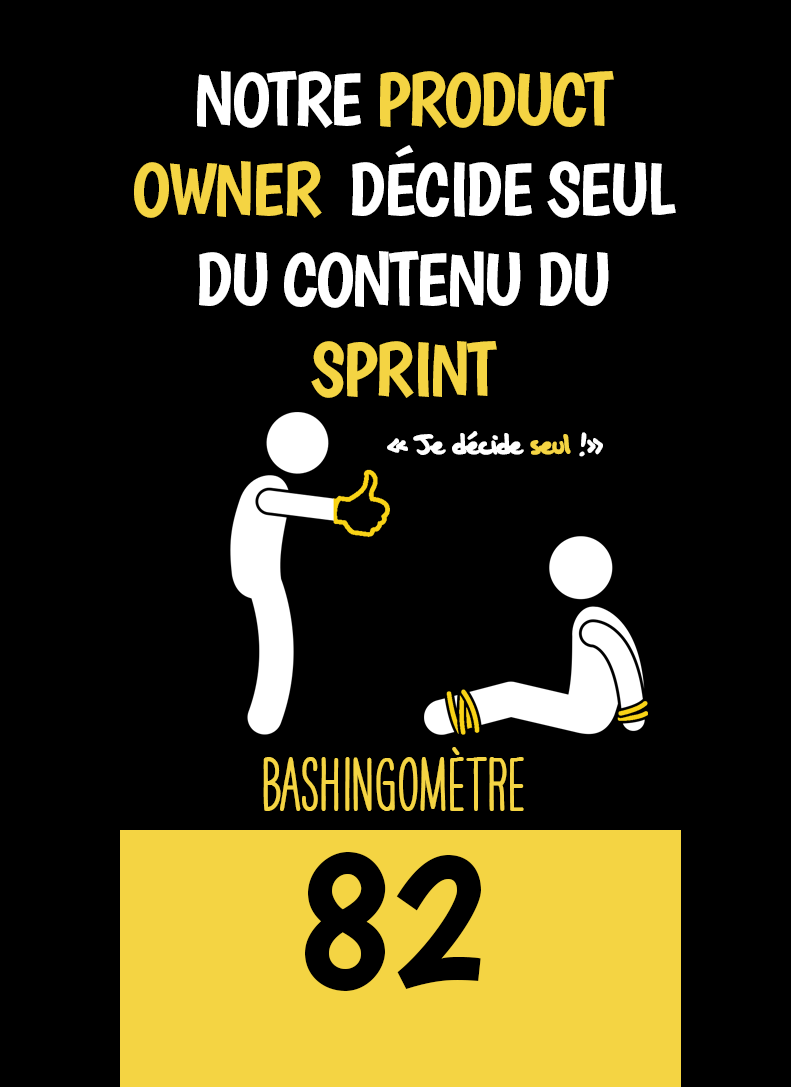
<style>
.page{position:relative;width:791px;height:1087px;background:#000000}
.page>*{position:absolute;margin:0}
.t1{font:75px "Boogaloo-Regular";letter-spacing:-0.04em;color:#ffffff}
.t2{font:75px "Boogaloo-Regular";letter-spacing:-0.04em;color:#f4d443}
.t3{font:33.3px "OakStreetW01-Regular";letter-spacing:-0.06em;color:#ffffff}
.t4{font:33.3px "OakStreetW01-Regular";letter-spacing:-0.06em;color:#f4d443}
.t5{font:66.7px "HAVEANICEDAYTallW04-Bold";color:#f4d443}
.t6{font:200px "Boogaloo-Regular";color:#000000}
</style>
<div class="page">
<p class="t1" style="left:134px;top:71px;width:542px;height:327px;text-align:center">NOTRE <span class="t2">PRODUCT OWNER</span>  DÉCIDE SEUL DU CONTENU DU <span class="t2">SPRINT</span></p>
<p class="t3" style="left:387px;top:431px;width:216px;height:26px">« Je décide <span class="t4">seul </span>!»</p>
<p class="t5" style="left:263px;top:747px;width:261px;height:64px">BASHINgomètre</p>
<p class="t6" style="left:305px;top:852px;width:176px;height:139px">82</p>
</div>
